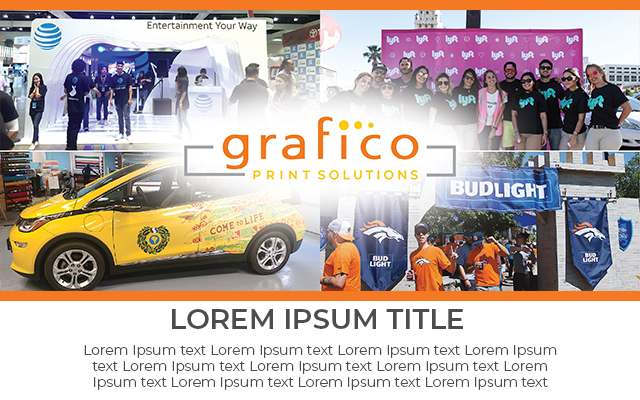
<style>
.page{position:relative;width:640px;height:400px;background:#ffffff}
.page>*{position:absolute;margin:0}
.t1{font:28px "Montserrat-SemiBold";color:#4d4d4d}
.t2{font:14px/15.9px "Montserrat-Light";color:#4d4d4d}
</style>
<div class="page">
<p class="t1" style="left:172px;top:309px;width:291px;height:20px">LOREM IPSUM TITLE</p>
<p class="t2" style="left:84px;top:345px;width:473px;height:45px;text-align:center">Lorem Ipsum text Lorem Ipsum text Lorem Ipsum text Lorem Ipsum text Lorem Ipsum text Lorem Ipsum text Lorem Ipsum text Lorem Ipsum text Lorem Ipsum text Lorem Ipsum text Lorem Ipsum text</p>
</div>
